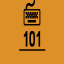
<style>
.page{position:relative;width:64px;height:64px;background:#de9028}
.page>*{position:absolute;margin:0}
.t1{font:20.1px "ArialMT";letter-spacing:0.02em;color:#060100;font-weight:bold;text-decoration:underline;scale:0.52 1}
</style>
<div class="page">
<p class="t1" style="left:19px;top:31px;width:27px;height:20px">101</p>
</div>
